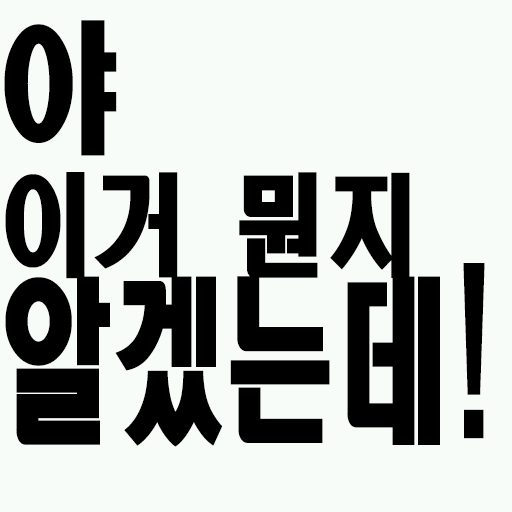
<style>
.page{position:relative;width:512px;height:512px;background:#f8fcf8}
.page>*{position:absolute;margin:0}
.t1{font:110.2px/140px "HeadlineR-HM";color:#000000;scale:0.84 1}
.t2{font:140.6px/140px "HeadlineR-HM";color:#000000;scale:0.84 1}
.t3{font:175px/140px "HeadlineR-HM";color:#000000;scale:0.64 1}
.t4{font:200px/140px "HeadlineR-HM";color:#000000;scale:0.64 1}
</style>
<div class="page">
<p class="t1" style="left:4px;top:20px;width:481px;height:427px"><span class="t2">야<br></span>이거 뭔지<br><span class="t3">알겠는데</span><span class="t4">!</span></p>
</div>
